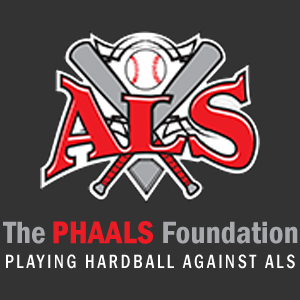
<style>
.page{position:relative;width:300px;height:300px;background:#333333}
.page>*{position:absolute;margin:0}
.t1{font:32px "FranklinGothic-DemiCond";color:#a7a9ac}
.t2{font:32px "FranklinGothic-DemiCond";color:#ed1c24;font-weight:bold}
.t3{font:20px "FranklinGothic-MediumCond";letter-spacing:0.16em;color:#ffffff;text-transform:uppercase;scale:0.87 1}
</style>
<div class="page">
<p class="t1" style="left:3px;top:221px;width:295px;height:23px">The <span class="t2">PHAALS </span>Foundation</p>
<p class="t3" style="left:6px;top:254px;width:289px;height:15px">Playing Hardball Against ALS</p>
</div>
